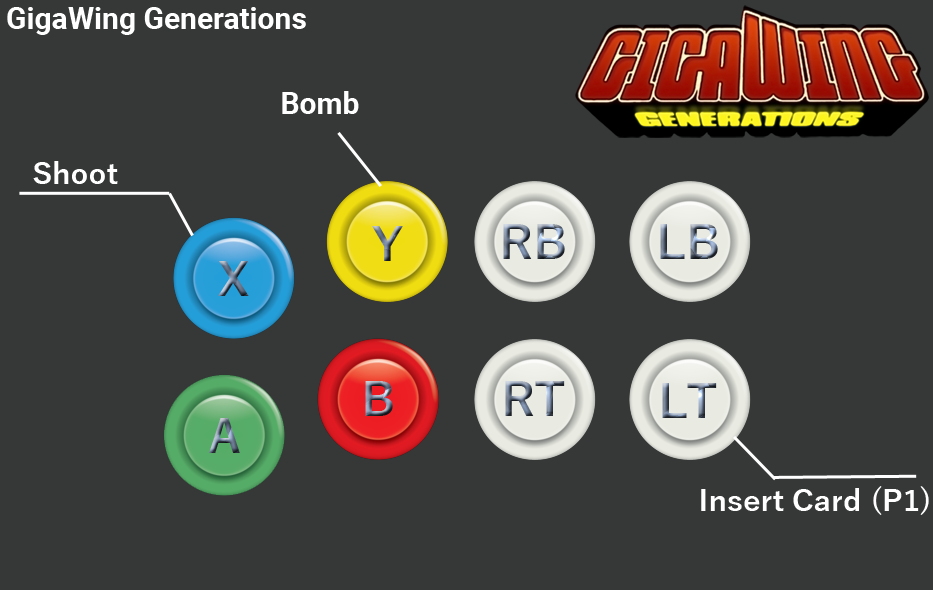
<style>
.page{position:relative;width:933px;height:590px;background:#363838}
.page>*{position:absolute;margin:0}
.t1{font:30px "Roboto-Bold";color:#ffffff}
.t2{font:30px "YuGothic-Bold";color:#ffffff}
</style>
<div class="page">
<p class="t1" style="left:7px;top:7px;width:299px;height:28px">GigaWing Generations</p>
<p class="t1" style="left:282px;top:91px;width:77px;height:23px">Bomb</p>
<p class="t2" style="left:33px;top:161px;width:85px;height:23px">Shoot</p>
<p class="t2" style="left:701px;top:486px;width:228px;height:29px">Insert Card (P1)</p>
</div>
